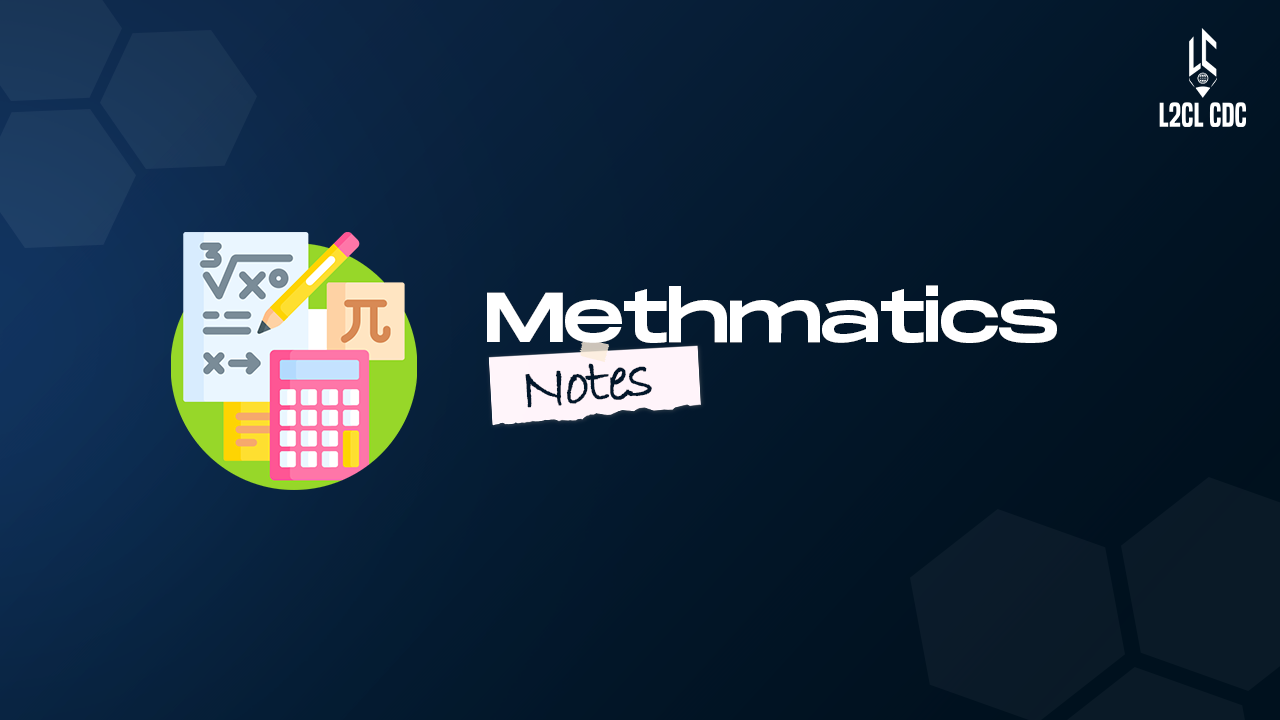
<style>
.page{position:relative;width:1280px;height:720px}
.page>*{position:absolute;margin:0}
.t1{font:70.3px "MonumentExtended-Regular";letter-spacing:-0.04em;color:#ffffff}
.t2{font:61.3px "BradleyHandITC";letter-spacing:-0.06em;color:#021629;font-weight:bold}
</style>
<div class="page">
<p class="t1" style="left:487px;top:285px;width:570px;height:58px">Methmatics</p>
<p class="t2" style="left:525px;top:363px;width:127px;height:45px;rotate:-6deg">Notes</p>
</div>
